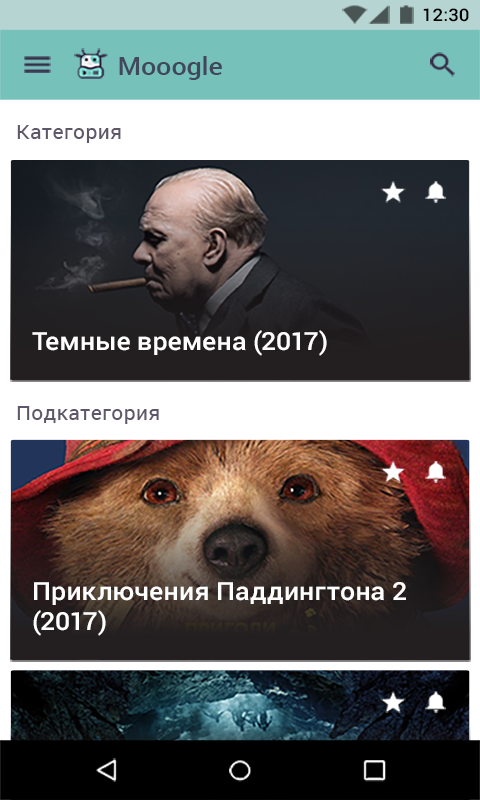
<style>
.page{position:relative;width:480px;height:800px}
.page>*{position:absolute;margin:0}
.t1{font:17.5px "Roboto-Medium";color:#000000;scale:1.07 1}
.t2{font:25px "Roboto-Medium";letter-spacing:0.005em;color:#41485b;scale:1.07 1}
.t3{font:20px "Roboto-Regular";letter-spacing:0.005em;color:#5e576a;scale:1.07 1}
.t4{font:25px "Roboto-Medium";color:#ffffff;scale:1.07 1}
.t5{font:25px/30px "Roboto-Medium";color:#ffffff;scale:1.07 1}
</style>
<div class="page">
<p class="t1" style="left:423px;top:8px;width:46px;height:14px">12:30</p>
<p class="t2" style="left:119px;top:56px;width:103px;height:24px">Mooogle</p>
<p class="t3" style="left:17px;top:125px;width:104px;height:18px">Категория</p>
<p class="t4" style="left:32px;top:330px;width:295px;height:26px">Темные времена (2017)</p>
<p class="t3" style="left:17px;top:406px;width:142px;height:18px">Подкатегория</p>
<p class="t5" style="left:33px;top:582px;width:373px;height:54px">Приключения Паддингтона 2 (2017)</p>
</div>
